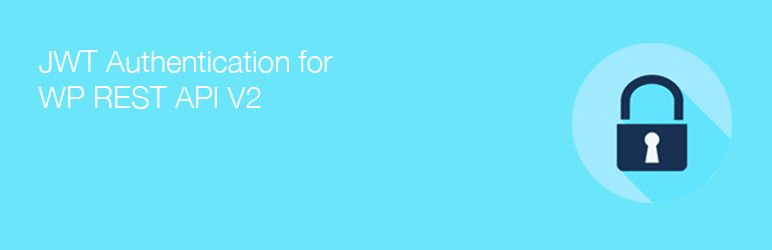
<style>
.page{position:relative;width:772px;height:250px;background:#6be5fa}
.page>*{position:absolute;margin:0}
.t1{font:30px "HelveticaNeue-Light";color:#ffffff}
</style>
<div class="page">
<p class="t1" style="left:38px;top:50px;width:295px;height:59px">JWT Authentication for<br>WP REST API V2</p>
</div>
